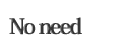
<style>
.page{position:relative;width:119px;height:48px;background:#ffffff}
.page>*{position:absolute;margin:0}
.t1{font:22px "HeiseiMinStd-W7";letter-spacing:-0.08em;color:#343434;font-weight:bold}
</style>
<div class="page">
<p class="t1" style="left:9px;top:17px;width:73px;height:18px">No need</p>
</div>
